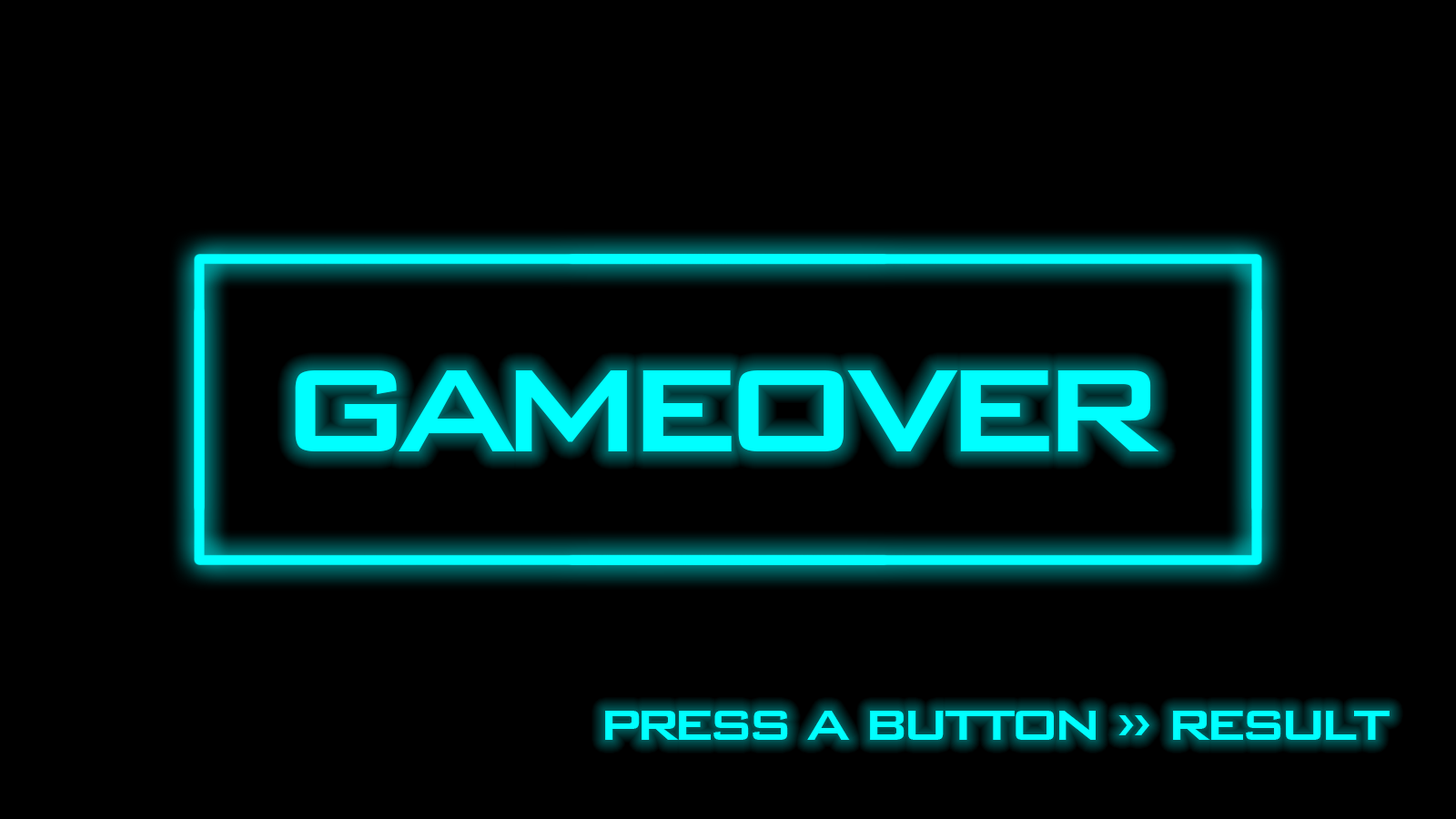
<style>
.page{position:relative;width:1456px;height:819px;background:#000000}
.page>*{position:absolute;margin:0}
.t1{font:191.8px "BankGothicBT-Medium";letter-spacing:-0.1em;color:#00ffff}
.t2{font:69.2px "BankGothicBT-Medium";letter-spacing:-0.1em;color:#00ffff}
</style>
<div class="page">
<p class="t1" style="left:295px;top:370px;width:864px;height:81px">gameover</p>
<p class="t2" style="left:605px;top:711px;width:785px;height:29px">press a button » result</p>
</div>
